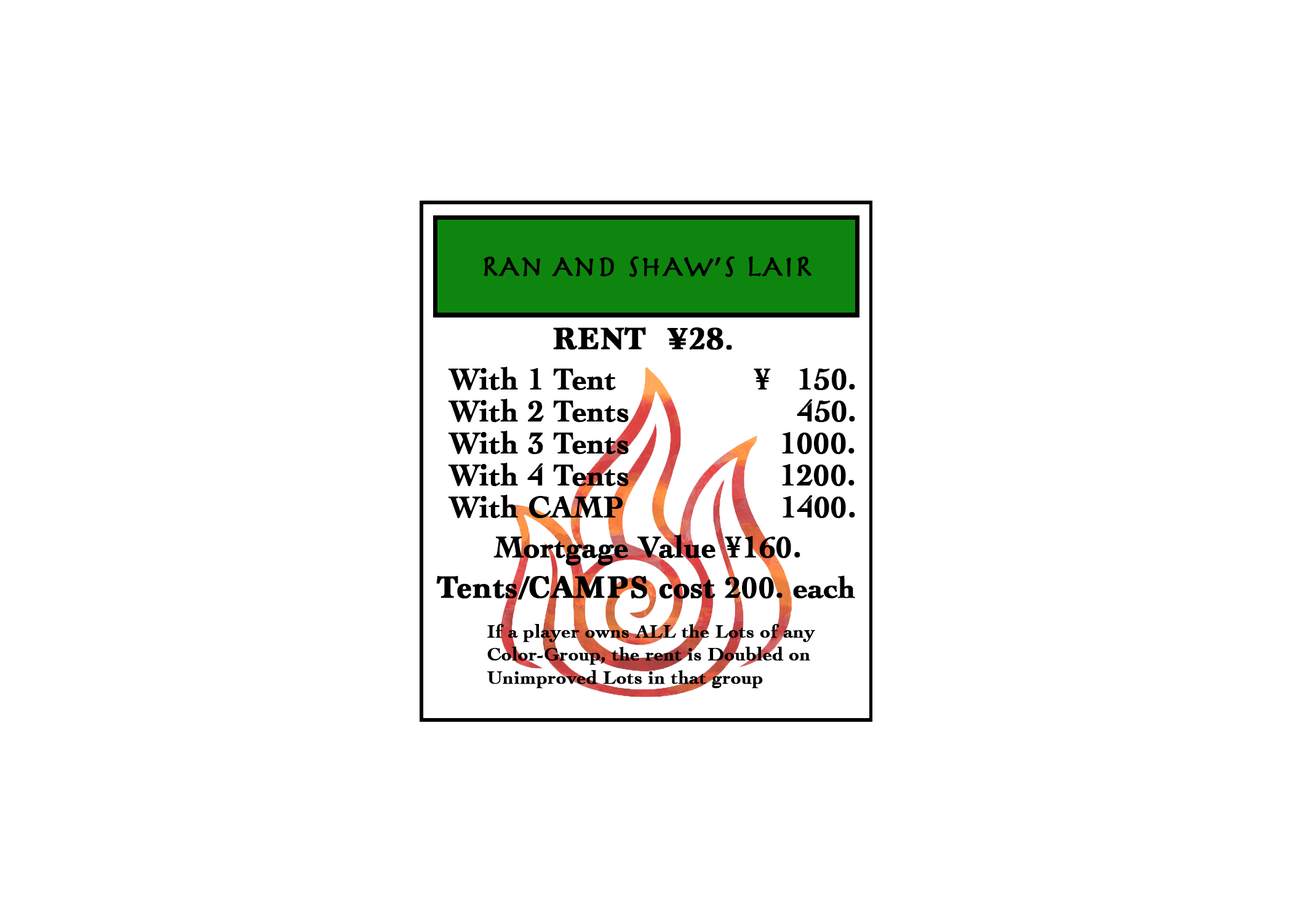
<style>
.page{position:relative;width:1292px;height:923px;background:#ffffff}
.page>*{position:absolute;margin:0}
.t1{font:30.8px "Herculanum";color:#000000;font-weight:bold}
.t2{font:32px "Marion-Bold";color:#000000;font-weight:bold}
.t3{font:30.8px "Cochin-Bold";color:#000000;font-weight:bold}
.t4{font:19.2px "Cochin-Bold";color:#000000;font-weight:bold}
</style>
<div class="page">
<p class="t1" style="left:484px;top:256px;width:328px;height:21px">RAn And shAw’s lAiR</p>
<p class="t2" style="left:553px;top:327px;width:179px;height:23px">RENT  ¥28.</p>
<p class="t3" style="left:448px;top:367px;width:407px;height:23px">With 1 Tent               ¥   150.</p>
<p class="t3" style="left:448px;top:399px;width:407px;height:23px">With 2 Tents                   450.</p>
<p class="t3" style="left:448px;top:431px;width:407px;height:23px">With 3 Tents                 1000.</p>
<p class="t3" style="left:448px;top:463px;width:407px;height:23px">With 4 Tents                 1200.</p>
<p class="t3" style="left:448px;top:495px;width:407px;height:23px">With CAMP                1400.</p>
<p class="t3" style="left:493px;top:535px;width:307px;height:30px">Mortgage Value ¥160.</p>
<p class="t2" style="left:436px;top:575px;width:419px;height:25px">Tents/CAMPS cost <span class="t3">200. each</span></p>
<p class="t4" style="left:487px;top:624px;width:328px;height:64px">If a player owns ALL the Lots of any <br>Color-Group, the rent is Doubled on <br>Unimproved Lots in that group</p>
</div>
